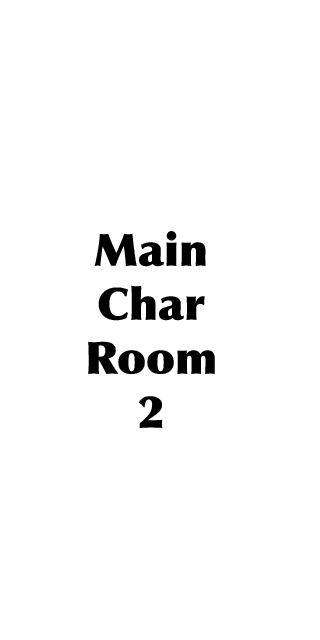
<style>
.page{position:relative;width:320px;height:640px;background:#ffffff}
.page>*{position:absolute;margin:0}
.t1{font:45px "Optima-ExtraBlack";color:#000000}
</style>
<div class="page">
<p class="t1" style="left:88px;top:231px;width:127px;height:197px;text-align:center">Main<br>Char<br>Room<br>2</p>
</div>
